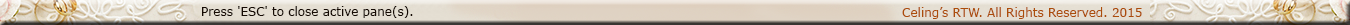
<style>
.page{position:relative;width:1350px;height:25px}
.page>*{position:absolute;margin:0}
.t1{font:12px "Verdana";color:#150a03}
.t2{font:12px "Verdana";color:#ac4d0a}
</style>
<div class="page">
<p class="t1" style="left:202px;top:6px;width:211px;height:12px">Press 'ESC' to close active pane(s).</p>
<p class="t2" style="left:902px;top:7px;width:240px;height:12px">Celing’s RTW. All Rights Reserved. 2015</p>
</div>
